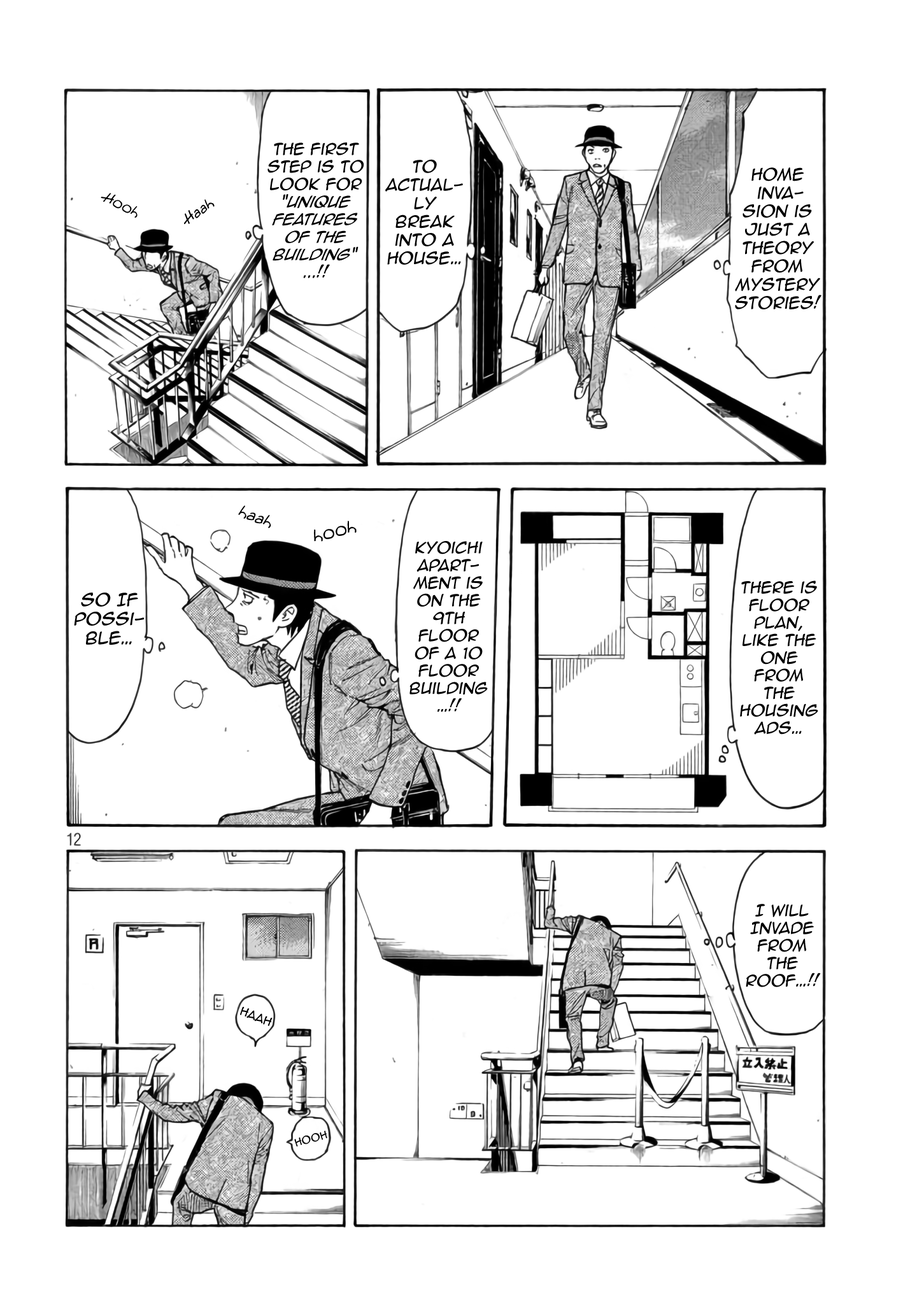
<style>
.page{position:relative;width:917px;height:1301px;background:#ffffff}
.page>*{position:absolute;margin:0}
.t1{font:14.6px "AnimeAce2.0BB";color:#000000;font-style:italic}
.t2{font:14.6px "AnimeAce2.0BB-Italic";color:#000000;font-style:italic}
.t3{font:15.3px "AnimeAce2.0BB";color:#000000;font-style:italic}
.t4{font:14.6px "Augie";color:#000000;font-style:italic}
.t5{font:16.5px "Augie";color:#000000;font-style:italic}
.t6{font:17.8px "Augie";color:#000000;font-style:italic}
.t7{font:15.9px "AnimeAce2.0BB";color:#000000;font-style:italic}
.t8{font:10.8px "AnimeAce2.0BB";color:#000000}
.t9{font:9.5px "AnimeAce2.0BB";color:#000000}
</style>
<div class="page">
<p class="t1" style="left:267px;top:142px;width:97px;height:136px;text-align:center">the First step is to look for "<span class="t2">unique features of the building</span>"<br>...!!</p>
<p class="t3" style="left:385px;top:159px;width:78px;height:106px;text-align:center">To <br>actually  break into a house…</p>
<p class="t3" style="left:735px;top:167px;width:86px;height:142px;text-align:center">Home<br> invasion is just a theory from mystery stories!</p>
<p class="t4" style="left:101px;top:193px;width:36px;height:25px;rotate:26deg">Hooh</p>
<p class="t4" style="left:184px;top:199px;width:30px;height:26px;rotate:-35deg">Haah</p>
<p class="t5" style="left:238px;top:505px;width:33px;height:23px;rotate:21deg">haah</p>
<p class="t6" style="left:314px;top:521px;width:42px;height:21px;rotate:-15deg">hooh</p>
<p class="t1" style="left:409px;top:541px;width:79px;height:171px;text-align:center">Kyoichi apartment is on the 9th floor <br>of a 10 floor building<br>…!!</p>
<p class="t1" style="left:740px;top:580px;width:78px;height:155px;text-align:center">There is floor plan, like the one from the housing ads…</p>
<p class="t7" style="left:74px;top:593px;width:70px;height:52px;text-align:center">so If <br>possible…</p>
<p class="t1" style="left:745px;top:904px;width:75px;height:83px;text-align:center">I will Invade from the roof…!!</p>
<p class="t8" style="left:240px;top:1006px;width:32px;height:20px;rotate:22deg">haah</p>
<p class="t9" style="left:294px;top:1130px;width:33px;height:17px;rotate:-15deg">Hooh</p>
</div>
